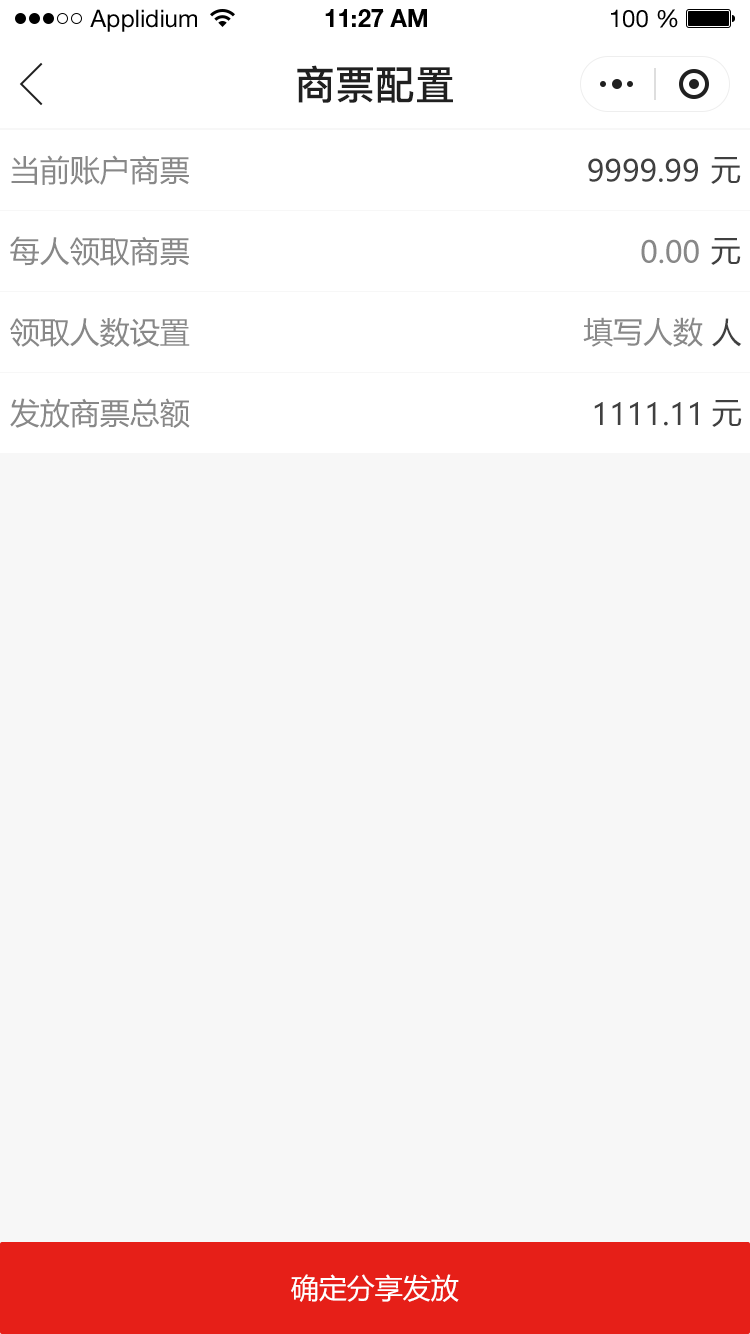
<style>
.page{position:relative;width:750px;height:1334px;background:#f7f7f7}
.page>*{position:absolute;margin:0}
.t1{font:24px "HelveticaNeueLTStd-Roman";color:#000000}
.t2{font:24px "HelveticaNeueLTStd-Bd";color:#000000}
.t3{font:40px "PingFang-SC-Bold";color:#202020;text-transform:uppercase}
.t4{font:30px "MicrosoftYaHei";color:#888888;text-transform:uppercase}
.t5{font:30px "MicrosoftYaHei";color:#404040;text-transform:uppercase}
.t6{font:28px "MicrosoftYaHei";color:#ffffff;text-transform:uppercase}
</style>
<div class="page">
<p class="t1" style="left:90px;top:9px;width:107px;height:23px">Applidium</p>
<p class="t2" style="left:325px;top:9px;width:102px;height:18px">11:27 AM</p>
<p class="t1" style="left:611px;top:9px;width:67px;height:19px">100 %</p>
<p class="t3" style="left:297px;top:65px;width:156px;height:38px">商票配置</p>
<p class="t4" style="left:11px;top:155px;width:178px;height:30px">当前账户商票</p>
<p class="t5" style="left:588px;top:158px;width:110px;height:24px">9999.99</p>
<p class="t5" style="left:711px;top:157px;width:30px;height:27px">元</p>
<p class="t4" style="left:10px;top:236px;width:179px;height:30px">每人领取商票</p>
<p class="t4" style="left:641px;top:239px;width:58px;height:25px">0.00</p>
<p class="t5" style="left:711px;top:238px;width:30px;height:27px">元</p>
<p class="t4" style="left:10px;top:317px;width:180px;height:30px">领取人数设置</p>
<p class="t4" style="left:583px;top:317px;width:120px;height:30px">填写人数</p>
<p class="t5" style="left:712px;top:318px;width:30px;height:29px">人</p>
<p class="t4" style="left:10px;top:398px;width:180px;height:30px">发放商票总额</p>
<p class="t5" style="left:712px;top:400px;width:30px;height:27px">元</p>
<p class="t5" style="left:594px;top:402px;width:104px;height:24px">1111.11</p>
<p class="t6" style="left:291px;top:1274px;width:168px;height:28px">确定分享发放</p>
</div>
